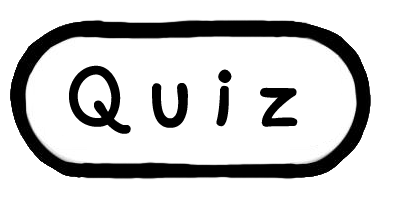
<style>
.page{position:relative;width:400px;height:200px;background:#ffffff}
.page>*{position:absolute;margin:0}
.t1{font:80px "Lavi";letter-spacing:0.3em;color:#000000;font-weight:bold}
</style>
<div class="page">
<p class="t1" style="left:69px;top:65px;width:229px;height:69px">Quiz</p>
</div>
